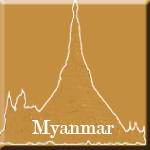
<style>
.page{position:relative;width:150px;height:150px;background:#c48e40}
.page>*{position:absolute;margin:0}
.t1{font:20.8px "Modern-Regular";color:#ffffff}
</style>
<div class="page">
<p class="t1" style="left:32px;top:120px;width:82px;height:18px">Myanmar</p>
</div>
